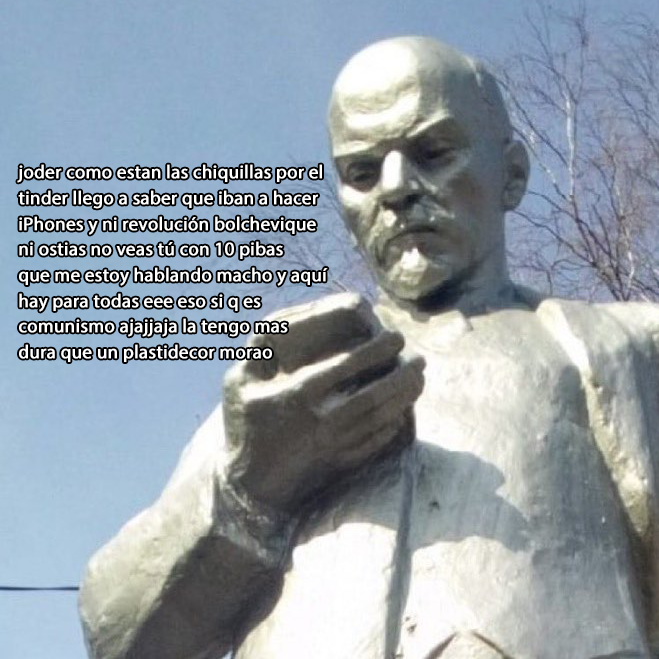
<style>
.page{position:relative;width:659px;height:659px}
.page>*{position:absolute;margin:0}
.t1{font:18.7px "MyriadPro-Regular";color:#ffffff;font-weight:bold}
</style>
<div class="page">
<p class="t1" style="left:17px;top:164px;width:311px;height:198px">joder como estan las chiquillas por el<br>tinder llego a saber que iban a hacer<br>iPhones y ni revolución bolchevique<br>ni ostias no veas tú con 10 pibas<br>que me estoy hablando macho y aquí<br>hay para todas eee eso si q es<br>comunismo ajajjaja la tengo mas<br>dura que un plastidecor morao</p>
</div>
